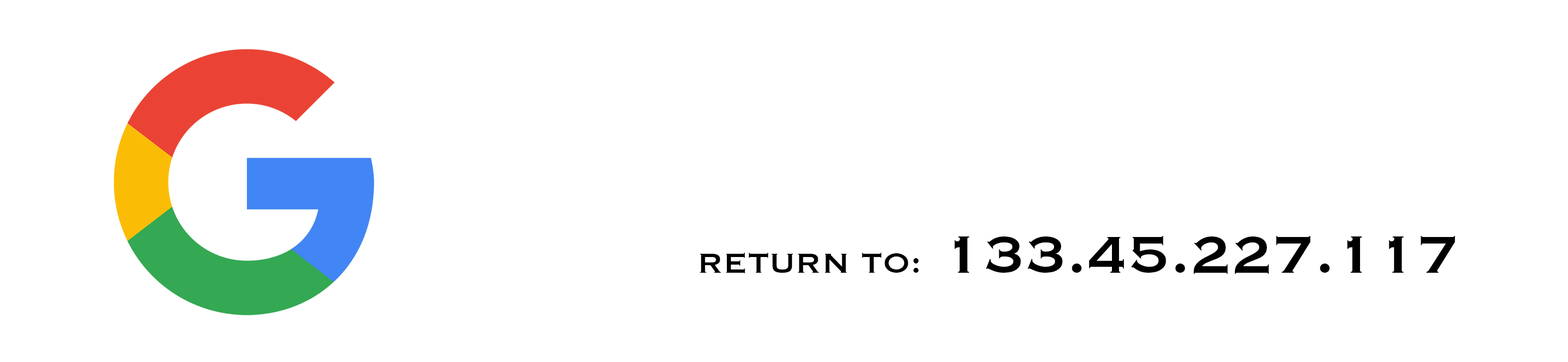
<style>
.page{position:relative;width:1568px;height:362px;background:#ffffff}
.page>*{position:absolute;margin:0}
.t1{font:67.7px "Copperplate";color:#000000}
.t2{font:36.1px "Copperplate";color:#000000}
</style>
<div class="page">
<p class="t1" style="left:700px;top:236px;width:755px;height:38px"><span class="t2">RETURN TO:</span> 133.45.227.117</p>
</div>
